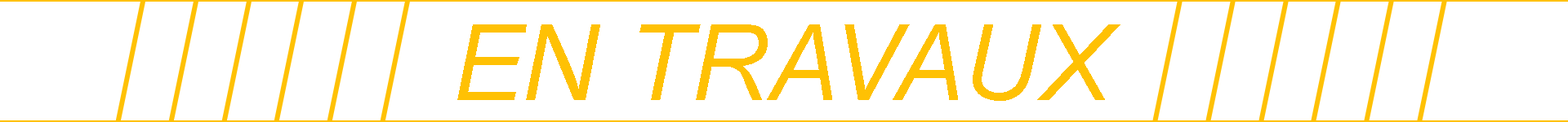
<style>
.page{position:relative;width:1568px;height:122px;background:#ffffff}
.page>*{position:absolute;margin:0}
.t1{font:105.6px "Arial-ItalicMT";color:#ffc104}
</style>
<div class="page">
<p class="t1" style="left:457px;top:24px;width:663px;height:77px">EN TRAVAUX</p>
</div>
